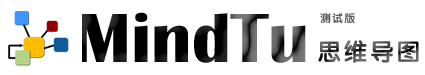
<style>
.page{position:relative;width:425px;height:75px;background:#ffffff}
.page>*{position:absolute;margin:0}
.t1{font:72px "BritannicBold"}
.t2{font:11px "FZY4JW--GB1-0";letter-spacing:0.1em;color:#5d5d5d}
.t3{font:24px "FZY4JW--GB1-0";letter-spacing:0.1em}
</style>
<div class="page">
<p class="t1" style="left:82px;top:12px;width:224px;height:51px">MindTu</p>
<p class="t2" style="left:320px;top:13px;width:35px;height:11px">测试版</p>
<p class="t3" style="left:318px;top:40px;width:101px;height:23px">思维导图</p>
</div>
